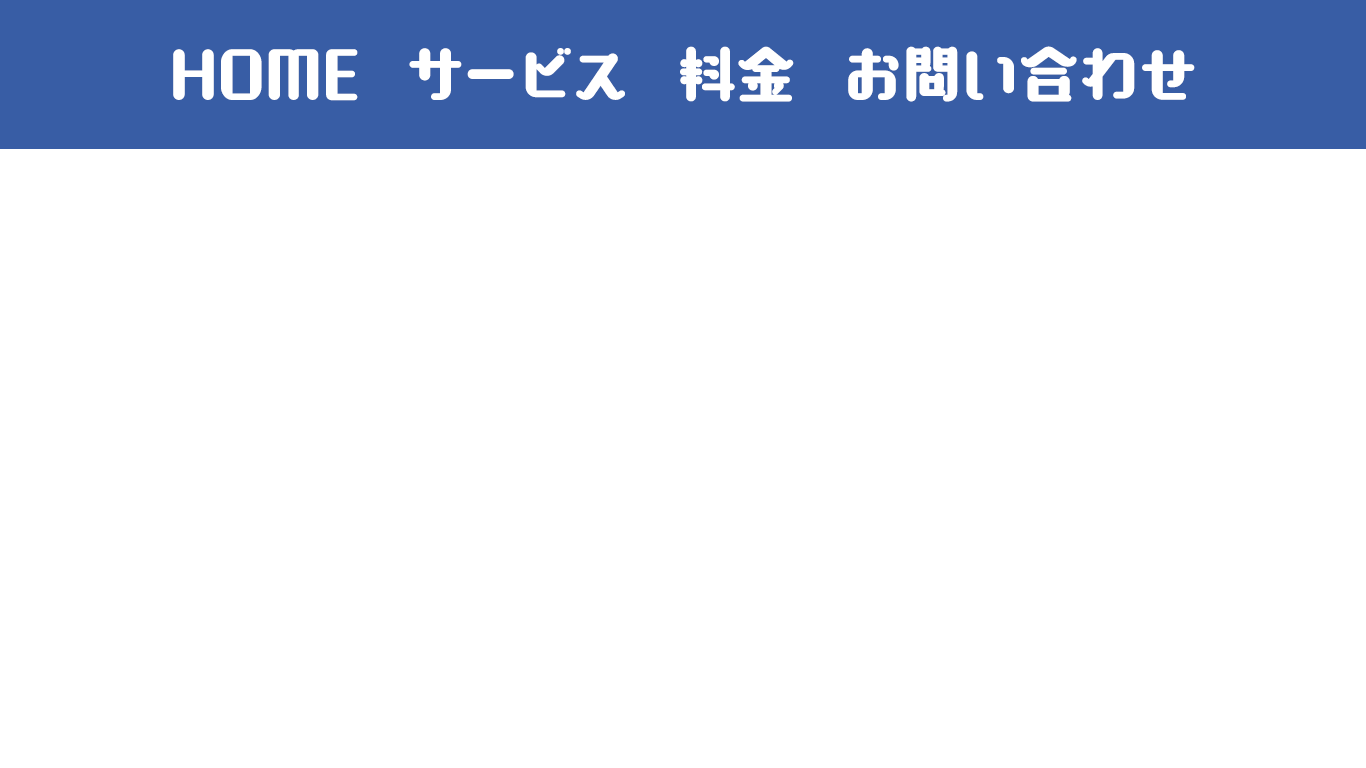
<style>
.page{position:relative;width:1366px;height:768px;background:#ffffff}
.page>*{position:absolute;margin:0}
.t1{font:60px "AokaneStd-EB";color:#ffffff;font-weight:bold}
</style>
<div class="page">
<p class="t1" style="left:173px;top:46px;width:1022px;height:56px">HOME  サービス  料金  お問い合わせ</p>
</div>
